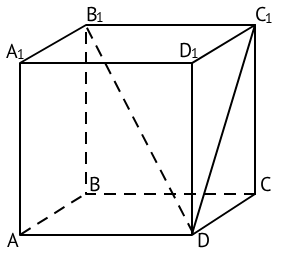
<style>
.page{position:relative;width:281px;height:254px;background:#ffffff}
.page>*{position:absolute;margin:0}
.t1{font:20px "PTSans-Regular";color:#000000}
.t2{font:14px "PTSans-Regular";color:#000000}
</style>
<div class="page">
<p class="t1" style="left:87px;top:6px;width:10px;height:16px">B</p>
<p class="t1" style="left:256px;top:6px;width:10px;height:16px">C</p>
<p class="t2" style="left:96px;top:12px;width:7px;height:10px">1</p>
<p class="t2" style="left:265px;top:13px;width:7px;height:10px">1</p>
<p class="t1" style="left:6px;top:43px;width:12px;height:15px">A</p>
<p class="t2" style="left:17px;top:49px;width:7px;height:10px">1</p>
<p class="t1" style="left:180px;top:42px;width:11px;height:16px">D</p>
<p class="t2" style="left:191px;top:48px;width:7px;height:10px">1</p>
<p class="t1" style="left:90px;top:176px;width:10px;height:16px">B</p>
<p class="t1" style="left:261px;top:176px;width:10px;height:16px">C</p>
<p class="t1" style="left:7px;top:232px;width:12px;height:15px">A</p>
<p class="t1" style="left:198px;top:232px;width:11px;height:16px">D</p>
</div>
